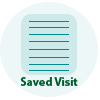
<style>
.page{position:relative;width:100px;height:100px;background:#edf7f7}
.page>*{position:absolute;margin:0}
.t1{font:12px "MyriadPro-Bold";color:#005c2d}
</style>
<div class="page">
<p class="t1" style="left:20px;top:77px;width:58px;height:9px">Saved Visit</p>
</div>
